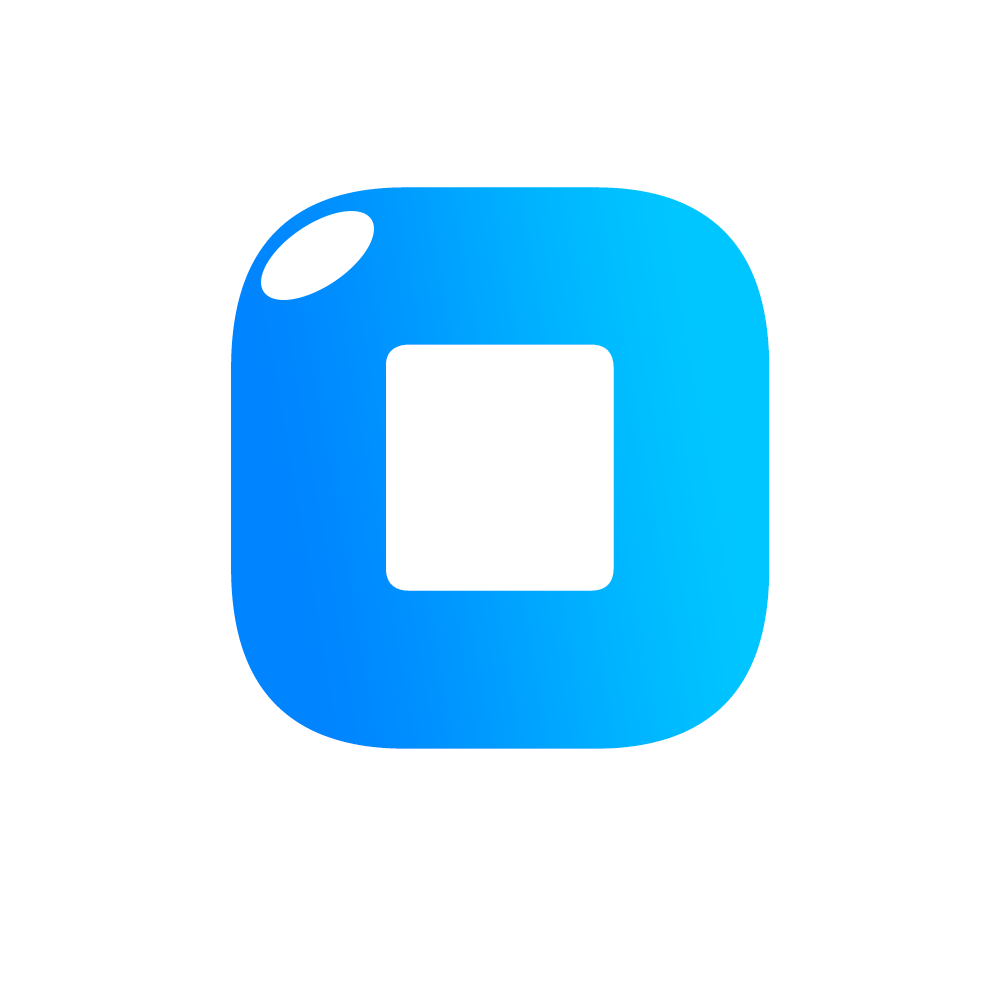
<style>
.page{position:relative;width:1000px;height:1000px;background:#ffffff}
.page>*{position:absolute;margin:0}
.t1{font:797.1px "Zorque-Regular"}
</style>
<div class="page">
<p class="t1" style="left:231px;top:187px;width:539px;height:562px">O</p>
<p class="t1" style="left:245px;top:193px;width:539px;height:562px">O</p>
</div>
